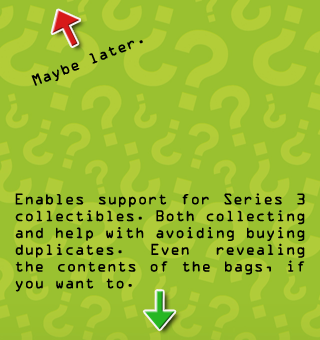
<style>
.page{position:relative;width:320px;height:340px;background:#9ac130}
.page>*{position:absolute;margin:0}
.t1{font:14px "OCRAStd";color:#000000}
</style>
<div class="page">
<p class="t1" style="left:31px;top:40px;width:112px;height:46px;rotate:-21deg">Maybe later.</p>
<p class="t1" style="left:15px;top:193px;width:290px;height:99px;text-align:justify">Enables support for Series 3 collectibles. Both collecting and help with avoiding buying duplicates. Even revealing the contents of the bags, if you want to.</p>
</div>
